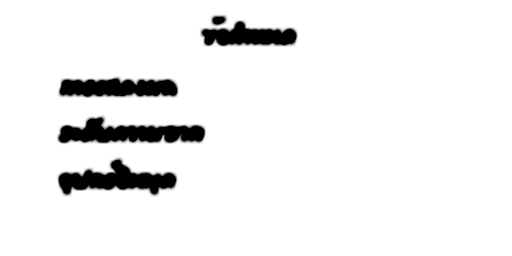
<style>
.page{position:relative;width:512px;height:256px;background:#ffffff}
.page>*{position:absolute;margin:0}
.t1{font:30px "DsSupasawatD";color:#000000}
</style>
<div class="page">
<p class="t1" style="left:203px;top:18px;width:91px;height:25px">¢éÍ¡ÓË¹´</p>
<p class="t1" style="left:60px;top:118px;width:142px;height:23px">ÃÐ´Ñº¤ÇÒÁÂÒ¡</p>
<p class="t1" style="left:60px;top:160px;width:114px;height:34px">ÍØ»¡ÃìÍÔ¹¾Øµ</p>
</div>
